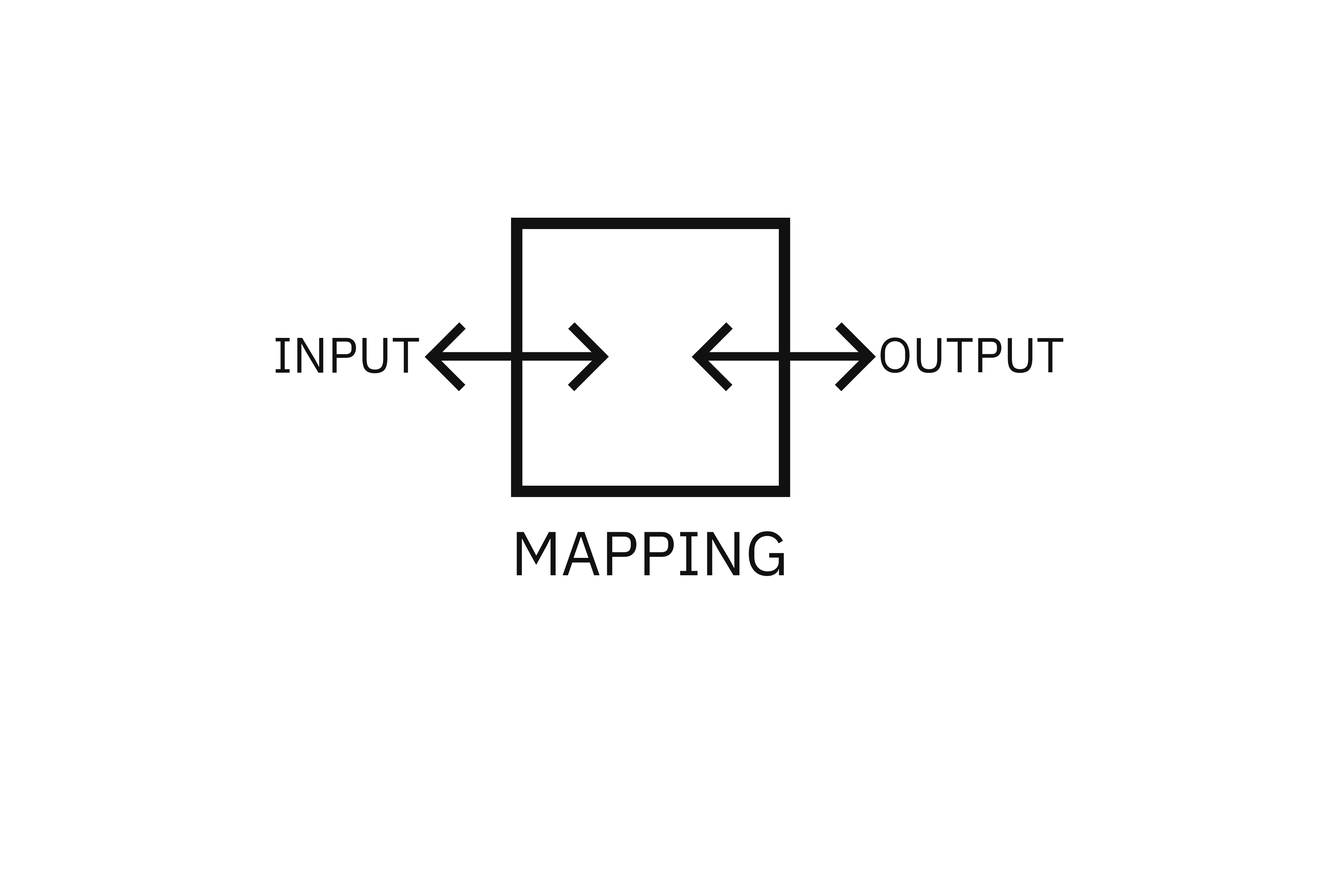
<style>
.page{position:relative;width:1337px;height:892px;background:#ffffff}
.page>*{position:absolute;margin:0}
.t1{font:49.8px "IBMPlexSans-Regular";color:#111111}
.t2{font:48.9px "IBMPlexSans-Regular";color:#111111}
.t3{font:61.9px "IBMPlexSans-Regular";color:#111111}
</style>
<div class="page">
<p class="t1" style="left:275px;top:337px;width:144px;height:36px">INPUT</p>
<p class="t2" style="left:881px;top:337px;width:183px;height:36px">OUTPUT</p>
<p class="t3" style="left:517px;top:531px;width:267px;height:45px">MAPPING</p>
</div>
